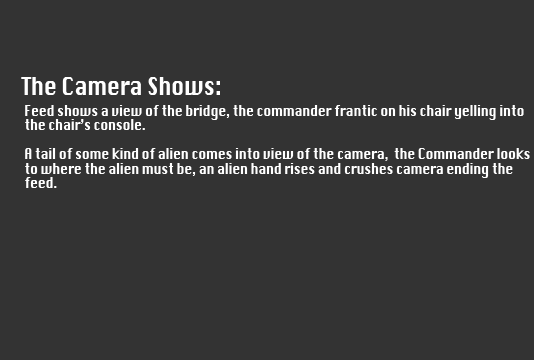
<style>
.page{position:relative;width:534px;height:360px;background:#333333}
.page>*{position:absolute;margin:0}
.t1{font:24px "Silom";letter-spacing:-0.02em;color:#ffffff;scale:0.83 1}
.t2{font:14.4px "Silom";letter-spacing:-0.02em;color:#ffffff;scale:0.83 1}
</style>
<div class="page">
<p class="t1" style="left:21px;top:77px;width:199px;height:18px">The Camera Shows:</p>
<p class="t2" style="left:25px;top:105px;width:505px;height:83px">Feed shows a view of the bridge, the commander frantic on his chair yelling into the chair’s console.<br><br>A tail of some kind of alien comes into view of the camera,  the Commander looks to where the alien must be, an alien hand rises and crushes camera ending the feed.</p>
</div>
